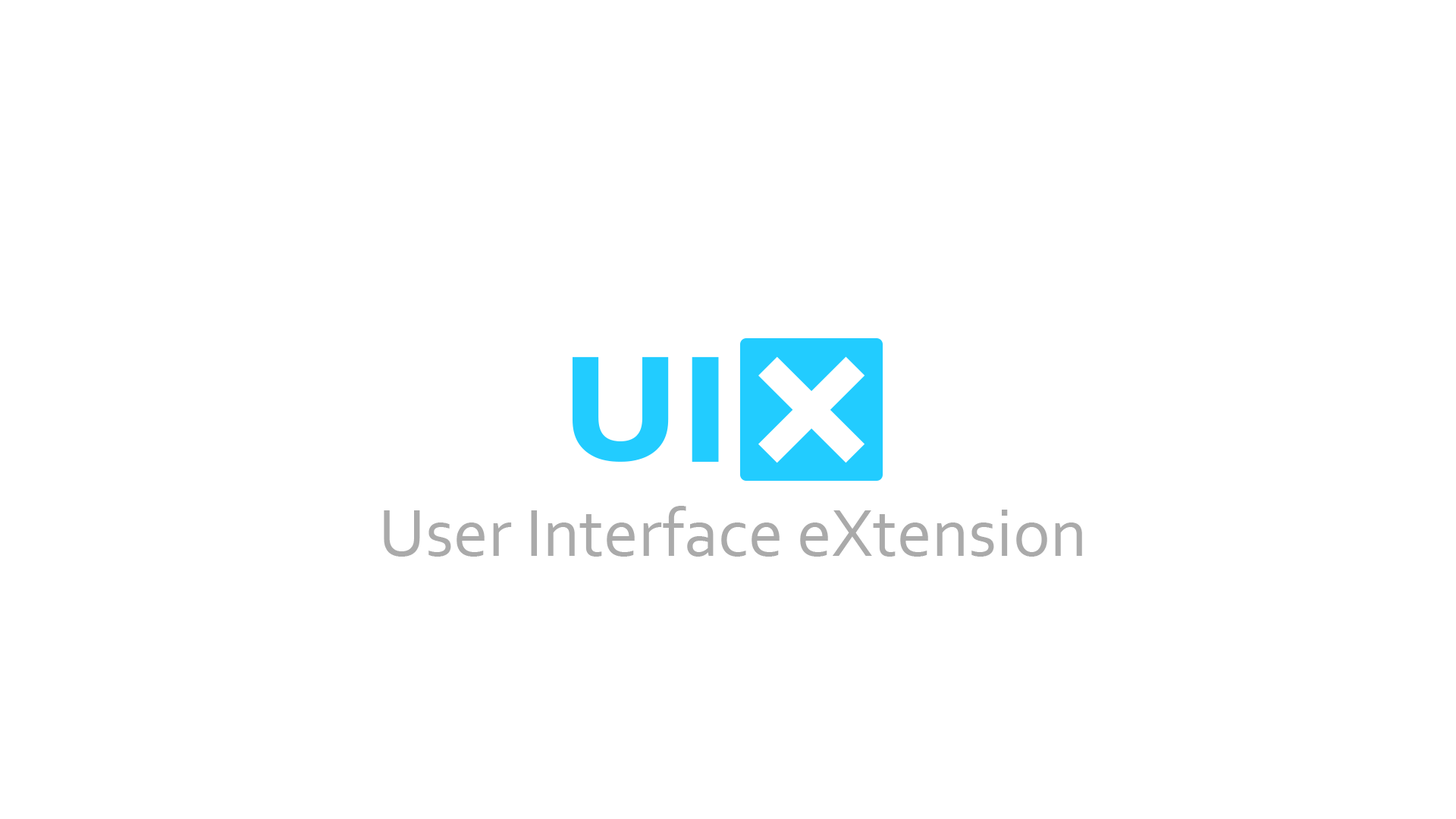
<style>
.page{position:relative;width:1456px;height:819px;background:#ffffff}
.page>*{position:absolute;margin:0}
.t1{font:69.8px "Corbel";color:#aaaaaa}
</style>
<div class="page">
<p class="t1" style="left:384px;top:506px;width:698px;height:51px">User Interface eXtension</p>
</div>
